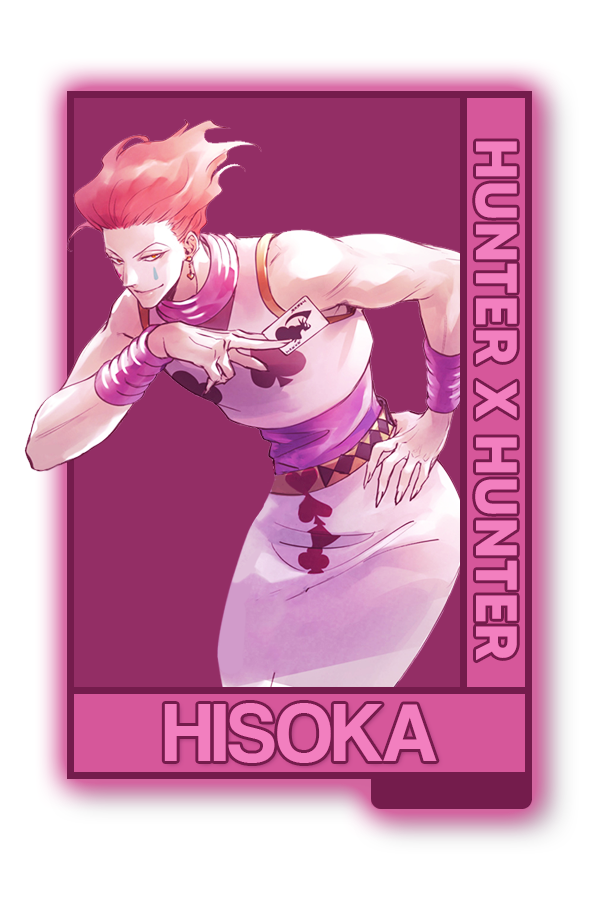
<style>
.page{position:relative;width:600px;height:900px;background:#ffffff}
.page>*{position:absolute;margin:0}
.t1{font:58.3px "MADETOMMY-Bold";color:#f27fbf}
.t2{font:84.2px "CoolveticaRg-Regular";color:#f27fbf}
</style>
<div class="page">
<p class="t1" style="left:475px;top:141px;width:42px;height:520px;rotate:90deg">HUNTER X HUNTER</p>
<p class="t2" style="left:164px;top:703px;width:273px;height:60px">HISOKA</p>
</div>
